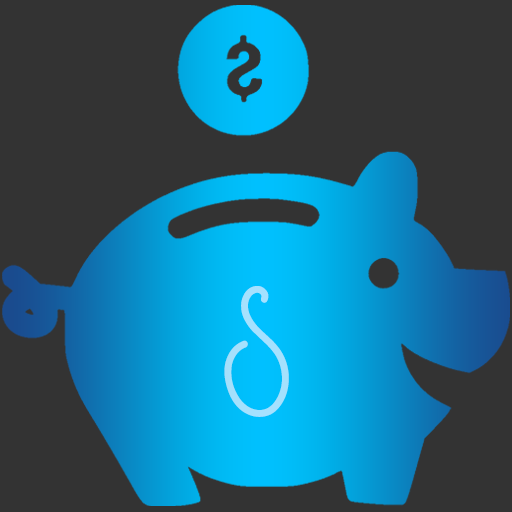
<style>
.page{position:relative;width:512px;height:512px;background:#333333}
.page>*{position:absolute;margin:0}
.t1{font:165px "NightWorkRegular";letter-spacing:-0.06em;color:#a5e1fd;text-transform:uppercase}
</style>
<div class="page">
<p class="t1" style="left:224px;top:286px;width:65px;height:131px">S</p>
</div>
